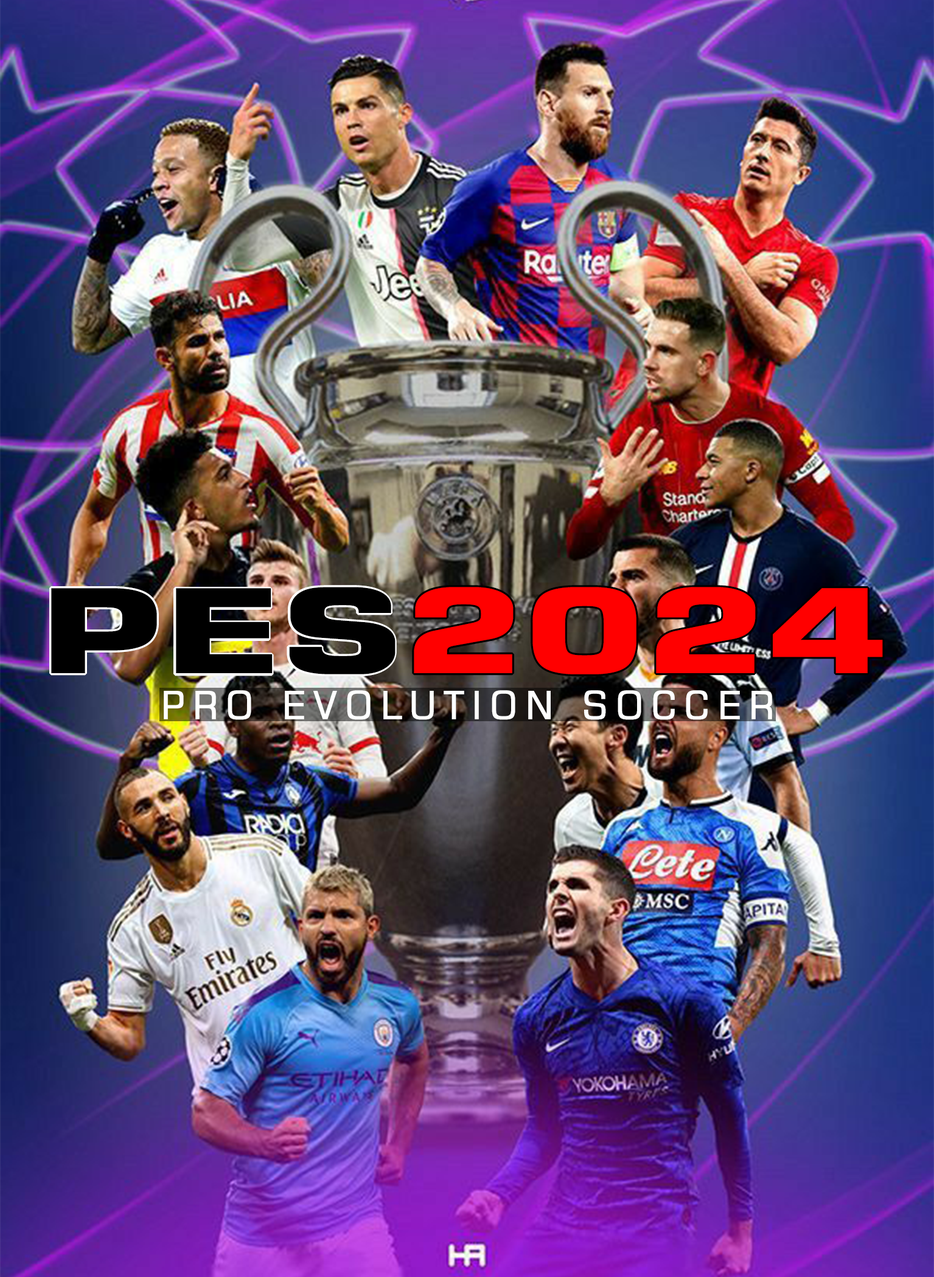
<style>
.page{position:relative;width:934px;height:1277px}
.page>*{position:absolute;margin:0}
.t1{font:117px "Square721BT-Bold";color:#000000;font-weight:bold;scale:1.48 1}
.t2{font:117px "Square721BT-Bold";color:#ff0000;scale:1.48 1}
.t3{font:117px "Square721BT-Bold";color:#000000;scale:1.48 1}
.t4{font:117px "Square721BT-Bold";color:#ff0000;font-weight:bold;scale:1.48 1}
.t5{font:38.5px "Square721BT-Roman";letter-spacing:0.22em;color:#ffffff;font-weight:bold;scale:0.92 1}
</style>
<div class="page">
<p class="t1" style="left:49px;top:586px;width:110px;height:90px">P</p>
<p class="t2" style="left:51px;top:587px;width:832px;height:88px"><span class="t3">PES</span>2024</p>
<p class="t1" style="left:173px;top:587px;width:101px;height:89px">E</p>
<p class="t4" style="left:412px;top:585px;width:103px;height:91px">2</p>
<p class="t4" style="left:530px;top:585px;width:108px;height:91px">0</p>
<p class="t4" style="left:654px;top:585px;width:103px;height:91px">2</p>
<p class="t4" style="left:770px;top:586px;width:114px;height:90px">4</p>
<p class="t5" style="left:164px;top:690px;width:608px;height:30px">PRO EVOLUTION SOCCER</p>
</div>
